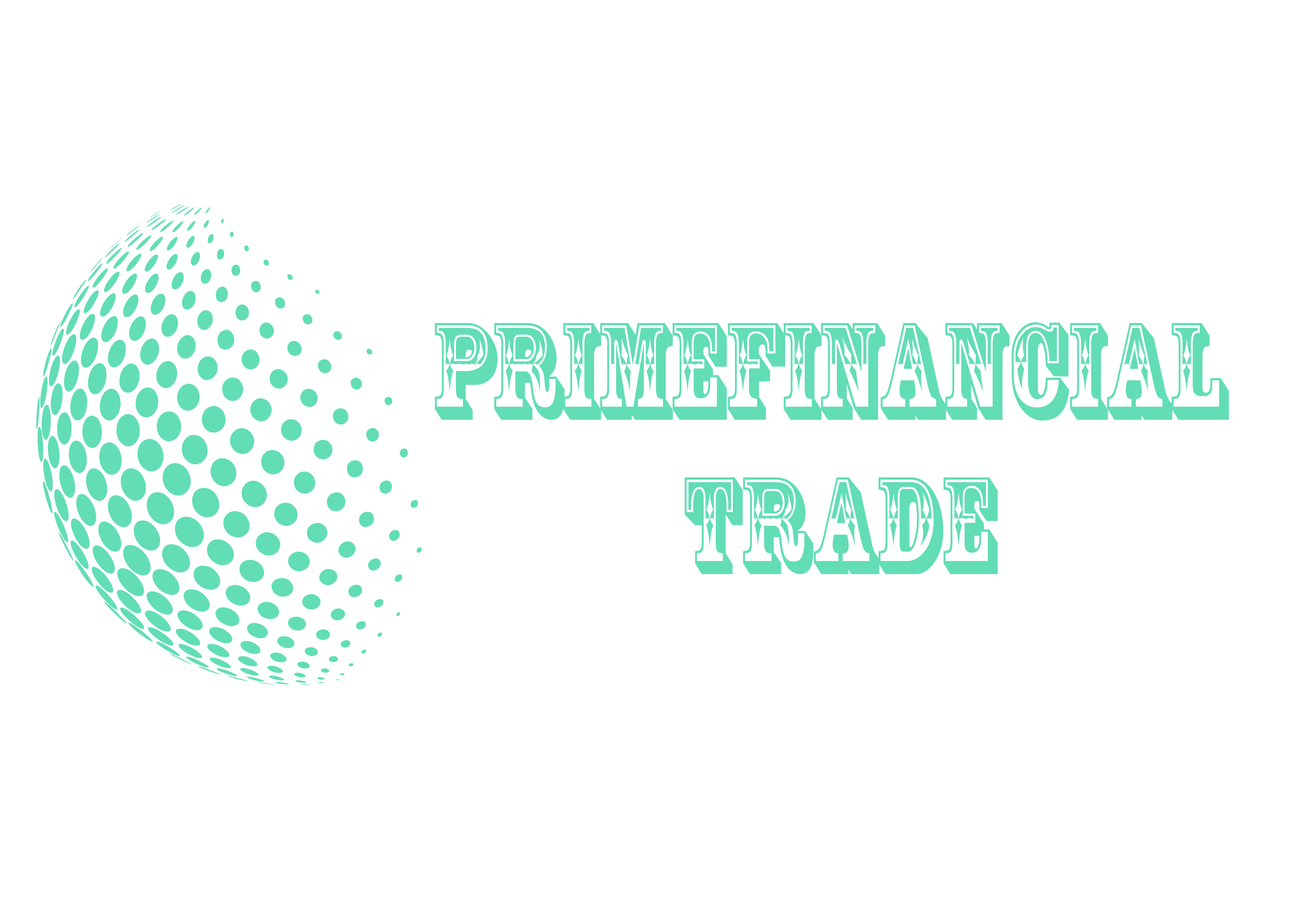
<style>
.page{position:relative;width:1292px;height:923px;background:#ffffff}
.page>*{position:absolute;margin:0}
.t1{font:128.5px "RosewoodStd-Regular";color:#63ddb5;text-transform:uppercase;scale:0.84 1}
</style>
<div class="page">
<p class="t1" style="left:435px;top:322px;width:794px;height:252px;text-align:center">PrimeFinancial <br>Trade</p>
</div>
